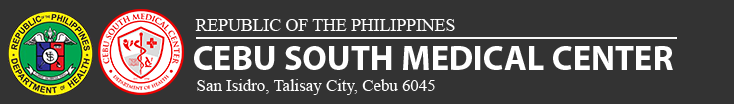
<style>
.page{position:relative;width:734px;height:104px;background:#333333}
.page>*{position:absolute;margin:0}
.t1{font:18px "TimesNewRomanPSMT";color:#ffffff}
.t2{font:35.3px "MyriadPro-Bold";color:#ffffff}
.t3{font:17.1px "TimesNewRomanPSMT";color:#ffffff}
</style>
<div class="page">
<p class="t1" style="left:195px;top:19px;width:260px;height:12px">REPUBLIC OF THE PHILIPPINES</p>
<p class="t2" style="left:194px;top:46px;width:479px;height:24px">CEBU SOUTH MEDICAL CENTER</p>
<p class="t3" style="left:197px;top:79px;width:238px;height:16px">San Isidro, Talisay City, Cebu 6045</p>
</div>
